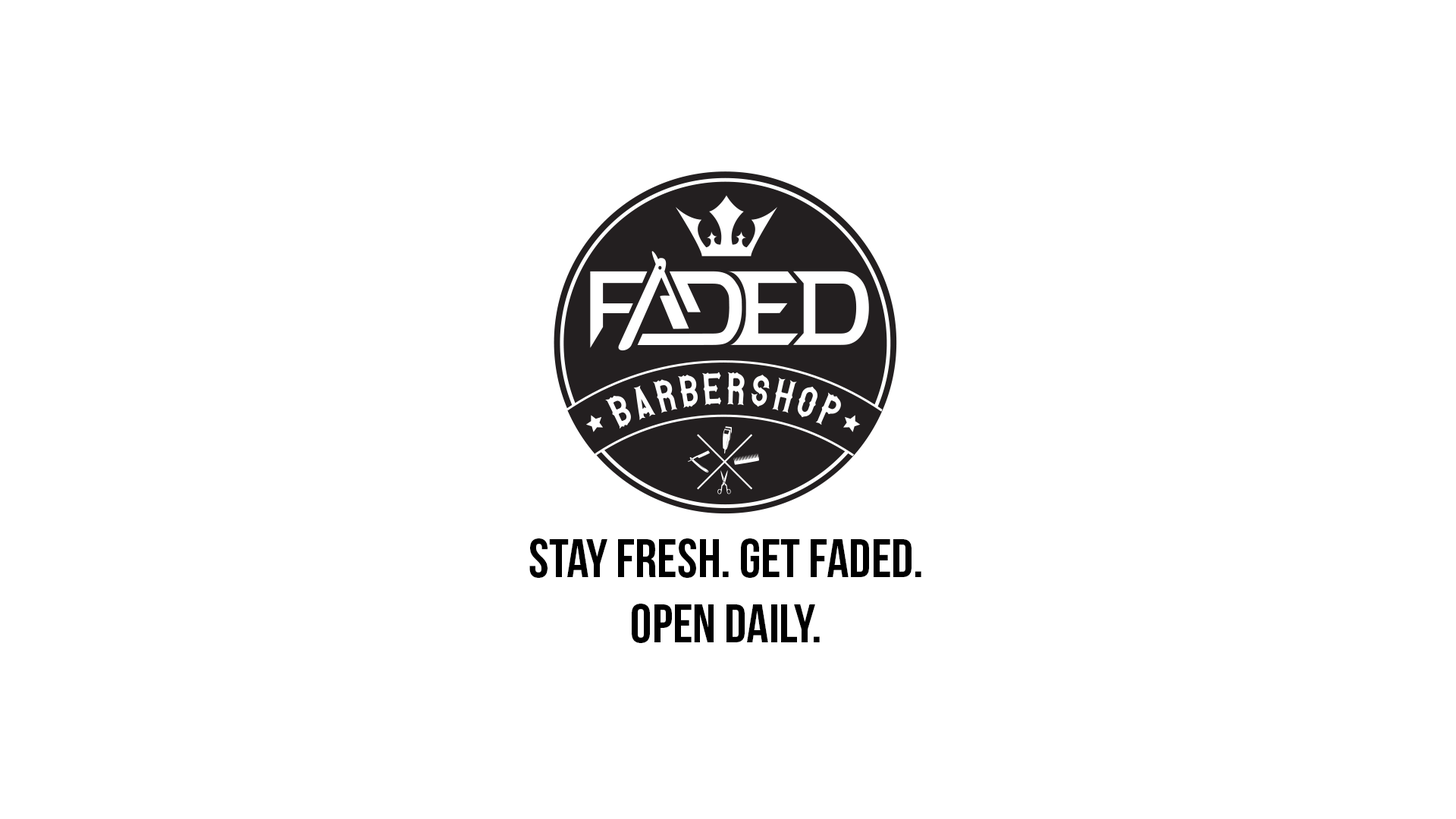
<style>
.page{position:relative;width:1456px;height:819px;background:#ffffff}
.page>*{position:absolute;margin:0}
.t1{font:54.5px "BebasNeue";color:#000000}
</style>
<div class="page">
<p class="t1" style="left:529px;top:538px;width:392px;height:105px;text-align:center">Stay fresh. get faded.<br>open daily.</p>
</div>
